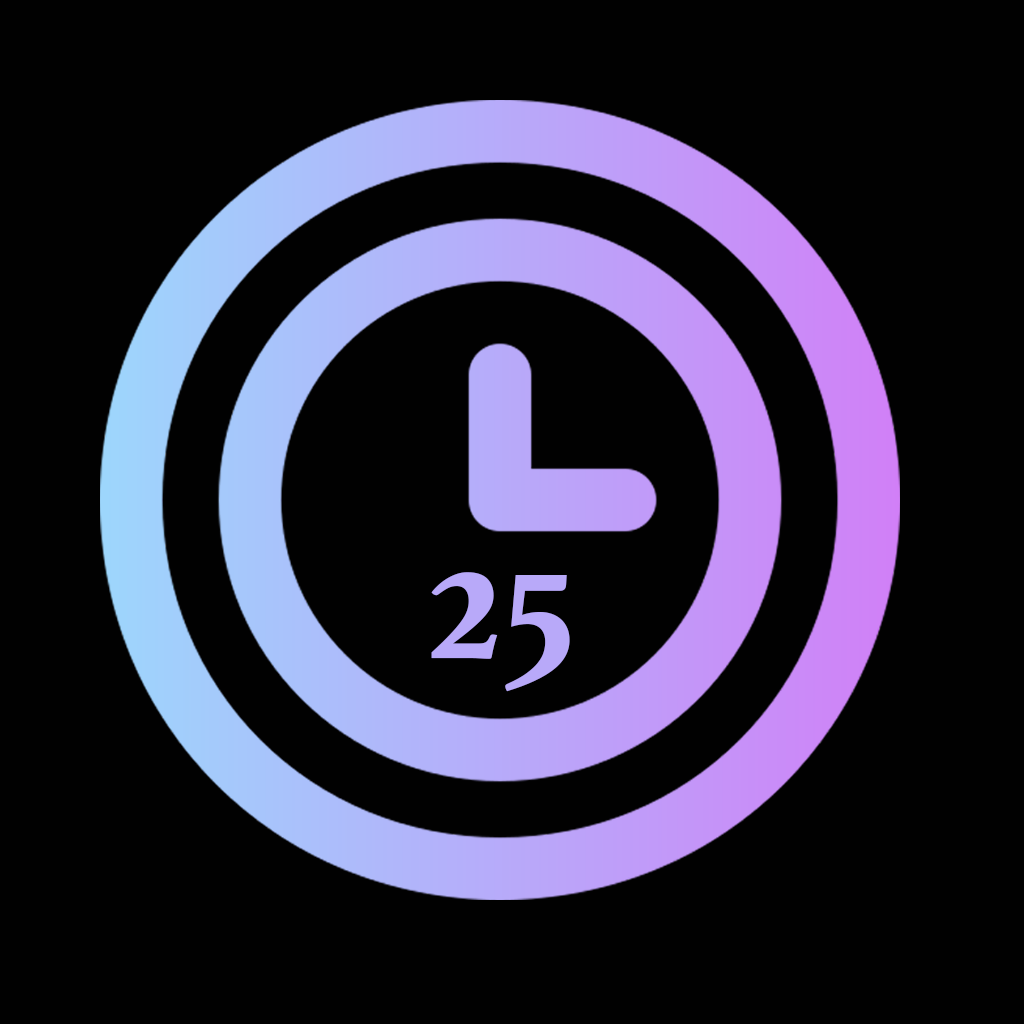
<style>
.page{position:relative;width:1024px;height:1024px;background:#010101}
.page>*{position:absolute;margin:0}
.t1{font:180px "Athelas-Bold";color:#b8a9f9}
</style>
<div class="page">
<p class="t1" style="left:431px;top:572px;width:139px;height:120px">25</p>
</div>
